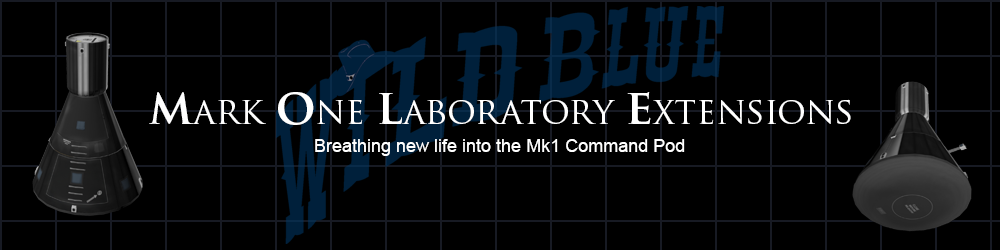
<style>
.page{position:relative;width:1000px;height:250px;background:#000000}
.page>*{position:absolute;margin:0}
.t1{font:36px "TrajanPro-Regular";color:#ffffff}
.t2{font:48px "TrajanPro-Bold";color:#ffffff}
.t3{font:18px "ArialMT";color:#ffffff}
</style>
<div class="page">
<p class="t1" style="left:149px;top:92px;width:702px;height:33px"><span class="t2">m</span>ark <span class="t2">o</span>ne <span class="t2">l</span>aboratory <span class="t2">e</span>xtensions</p>
<p class="t3" style="left:315px;top:139px;width:370px;height:17px">Breathing new life into the Mk1 Command Pod</p>
</div>
